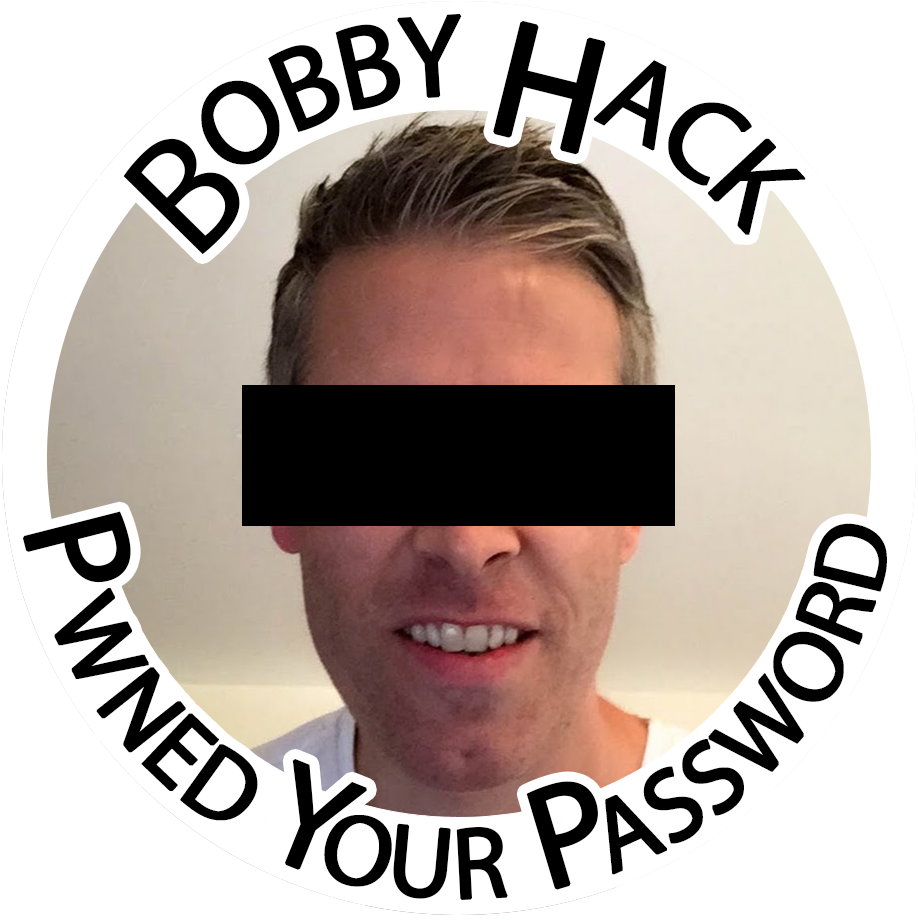
<style>
.page{position:relative;width:918px;height:920px;background:#ffffff}
.page>*{position:absolute;margin:0}
.t1{font:166.7px "MyriadPro-Regular";letter-spacing:-0.06em;color:#000000;font-variant:small-caps;font-weight:bold}
.t2{font:145.8px/187.5px "MyriadPro-Regular";color:#000000;font-variant:small-caps;font-weight:bold}
.t3{font:145.8px/187.5px "MyriadPro-Regular";letter-spacing:0.08em;color:#000000;font-variant:small-caps;font-weight:bold}
.t4{font:145.8px/187.5px "MyriadPro-Regular";letter-spacing:-0.14em;color:#000000;font-variant:small-caps;font-weight:bold}
.t5{font:145.8px/187.5px "MyriadPro-Regular";letter-spacing:-0.1em;color:#000000;font-variant:small-caps;font-weight:bold}
.t6{font:145.8px/187.5px "MyriadPro-Regular";letter-spacing:-0.005em;color:#000000;font-variant:small-caps;font-weight:bold}
.t7{font:145.8px/187.5px "MyriadPro-Regular";letter-spacing:0.035em;color:#000000;font-variant:small-caps;font-weight:bold}
</style>
<div class="page">
<p class="t1" style="left:123px;top:13px;width:683px;height:242px">Bobby Hack</p>
<p class="t2" style="left:22px;top:511px;width:865px;height:389px;text-align:center"><span class="t3">Pw</span>ned <span class="t4">Y</span>our <span class="t5">P</span><span class="t6">as</span><span class="t7">sw</span>ord</p>
</div>
